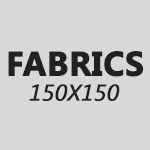
<style>
.page{position:relative;width:150px;height:150px;background:#dad7d7}
.page>*{position:absolute;margin:0}
.t1{font:33.6px "SegoeUI-Bold";color:#222020;text-transform:uppercase;font-weight:bold}
.t2{font:22.7px "SegoeUI-Italic";color:#222020;text-transform:uppercase;font-weight:bold}
</style>
<div class="page">
<p class="t1" style="left:8px;top:51px;width:135px;height:26px">fabrics</p>
<p class="t2" style="left:29px;top:84px;width:91px;height:17px">150x150</p>
</div>
